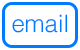
<style>
.page{position:relative;width:80px;height:50px;background:#ffffff}
.page>*{position:absolute;margin:0}
.t1{font:24px "Helvetica-Light";color:#007aff}
</style>
<div class="page">
<p class="t1" style="left:12px;top:14px;width:56px;height:19px">email</p>
</div>
